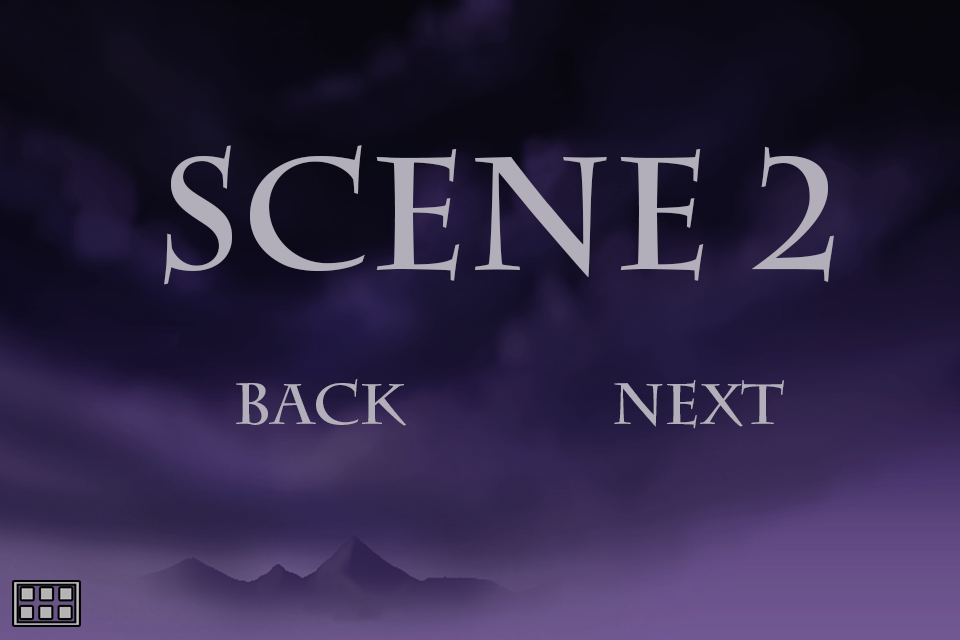
<style>
.page{position:relative;width:960px;height:640px}
.page>*{position:absolute;margin:0}
.t1{font:158px "CharlemagneStd-Bold";color:#b2afba}
.t2{font:57.7px "CharlemagneStd-Bold";color:#b2afba}
</style>
<div class="page">
<p class="t1" style="left:164px;top:145px;width:670px;height:140px">scene 2</p>
<p class="t2" style="left:236px;top:379px;width:170px;height:47px">back</p>
<p class="t2" style="left:614px;top:380px;width:170px;height:49px">Next</p>
</div>
